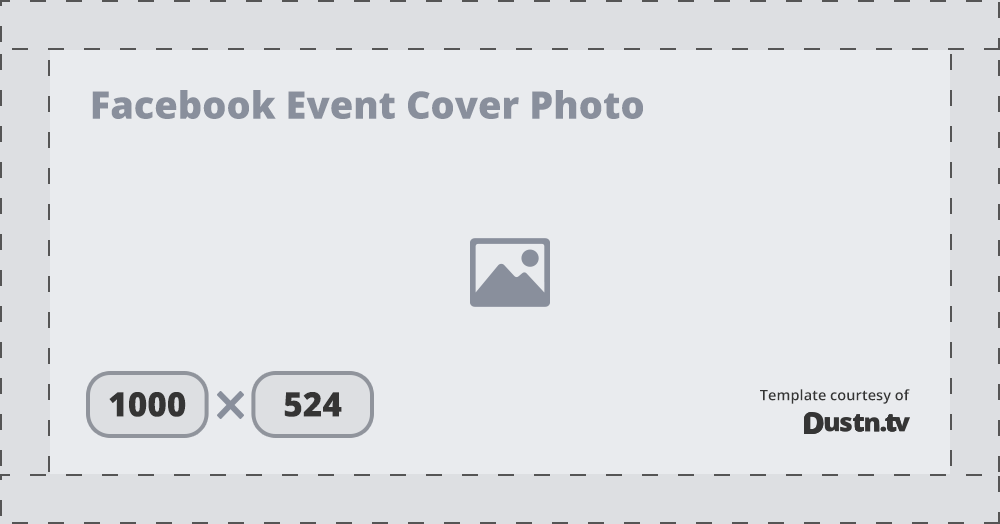
<style>
.page{position:relative;width:1000px;height:524px;background:#e9ebee}
.page>*{position:absolute;margin:0}
.t1{font:38px "OpenSans-Extrabold";color:#898f9c}
.t2{font:14.5px "OpenSans-Semibold";color:#353535}
.t3{font:33.9px "OpenSans-Extrabold";color:#353535}
</style>
<div class="page">
<p class="t1" style="left:92px;top:90px;width:551px;height:29px">Facebook Event Cover Photo</p>
<p class="t2" style="left:760px;top:389px;width:150px;height:15px">Template courtesy of</p>
<p class="t3" style="left:109px;top:392px;width:77px;height:25px">1000</p>
<p class="t3" style="left:284px;top:392px;width:58px;height:25px">524</p>
</div>
